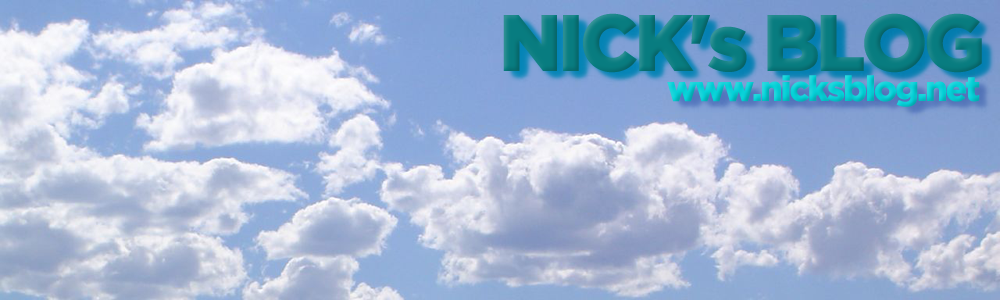
<style>
.page{position:relative;width:1000px;height:300px}
.page>*{position:absolute;margin:0}
.t1{font:80px "GothamBlack";letter-spacing:-0.05em;color:#087c80}
.t2{font:35px "GothamBlack";letter-spacing:-0.05em;color:#05d0d7}
</style>
<div class="page">
<p class="t1" style="left:503px;top:13px;width:479px;height:60px">NICK's BLOG</p>
<p class="t2" style="left:667px;top:75px;width:313px;height:32px">www.nicksblog.net</p>
</div>
